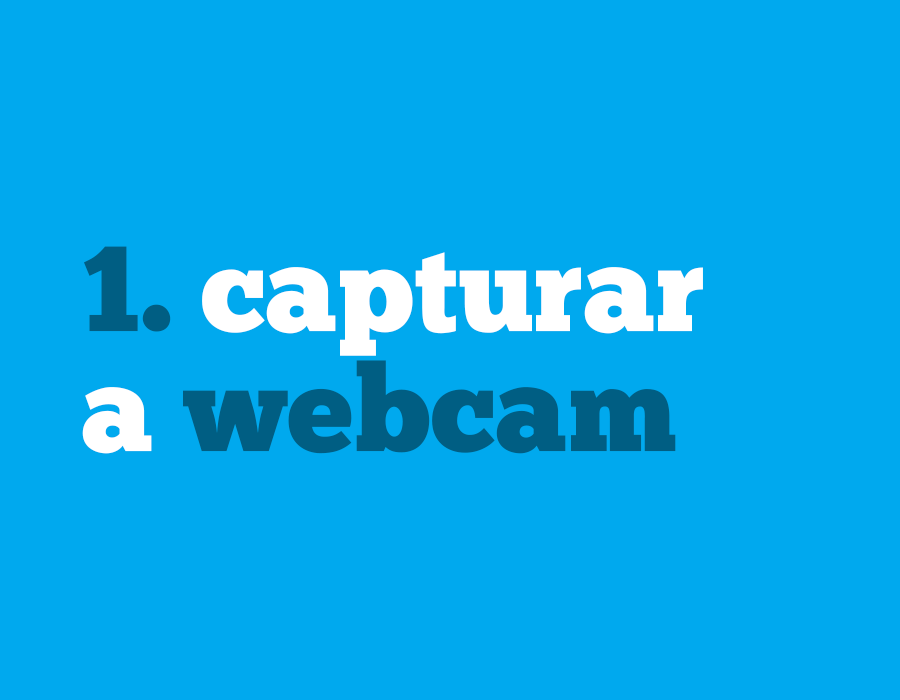
<style>
.page{position:relative;width:900px;height:700px;background:#00a9ee}
.page>*{position:absolute;margin:0}
.t1{font:120.7px/120px "ChunkFive-Roman";color:#ffffff}
.t2{font:120.7px/120px "ChunkFive-Roman";color:#005e83}
</style>
<div class="page">
<p class="t1" style="left:82px;top:246px;width:621px;height:208px"><span class="t2">1. </span>capturar<br>a <span class="t2">webcam</span></p>
</div>
